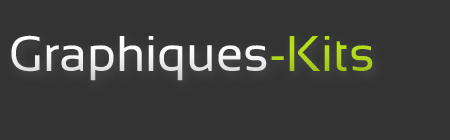
<style>
.page{position:relative;width:450px;height:140px;background:#333333}
.page>*{position:absolute;margin:0}
.t1{font:50px "Sansation-Regular";color:#ffffff}
.t2{font:50px "Sansation-Regular";color:#b5de13}
</style>
<div class="page">
<p class="t1" style="left:11px;top:35px;width:362px;height:46px">Graphiques<span class="t2">-Kits</span></p>
</div>
